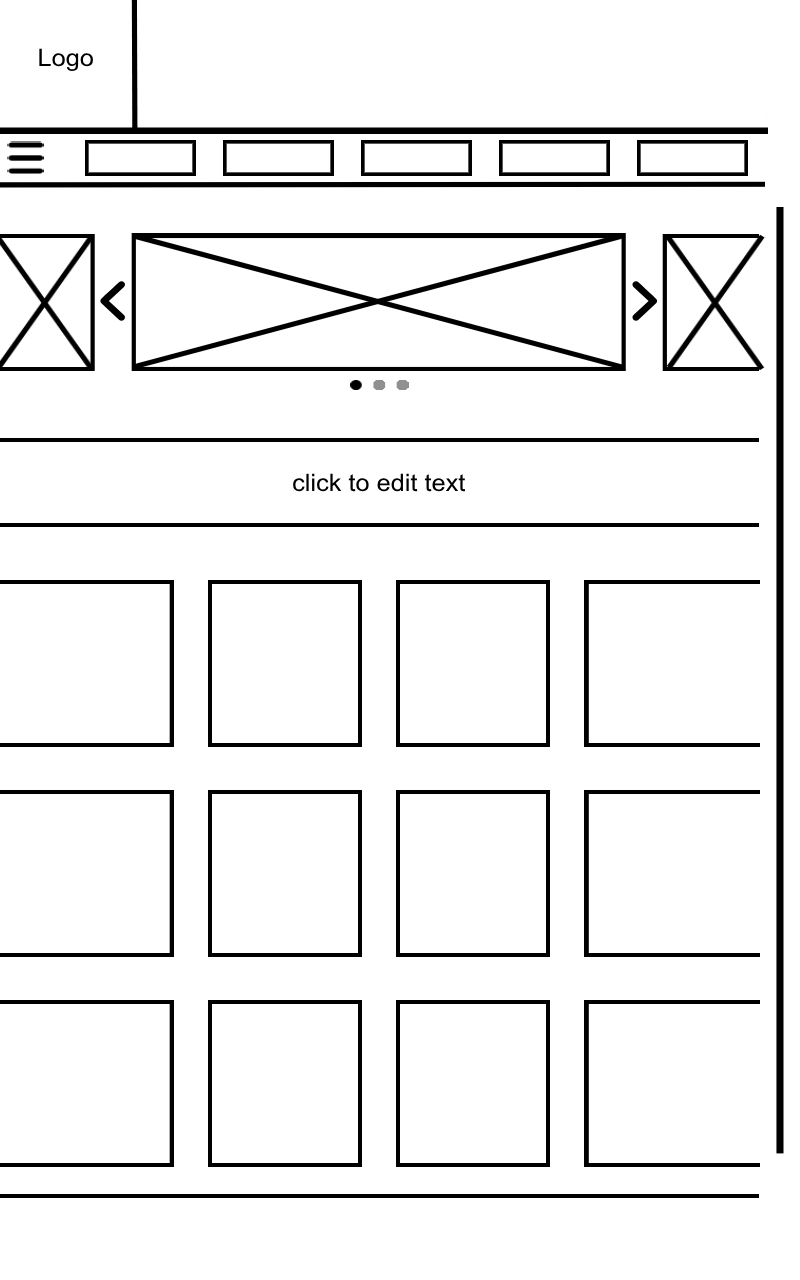
<style>
.page{position:relative;width:800px;height:1280px;background:#ffffff}
.page>*{position:absolute;margin:0}
.t1{font:24px "ArialMT";color:#000000;scale:1.06 1}
</style>
<div class="page">
<p class="t1" style="left:39px;top:48px;width:54px;height:23px">Logo</p>
<p class="t1" style="left:293px;top:473px;width:173px;height:19px">click to edit text</p>
</div>
